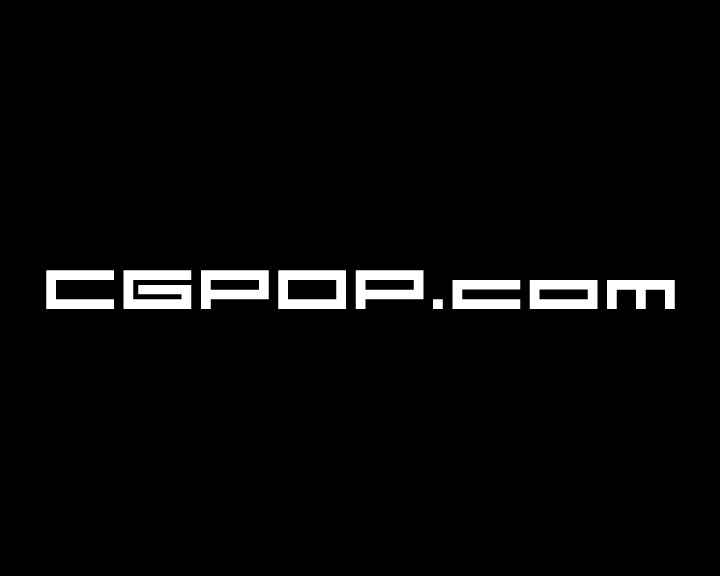
<style>
.page{position:relative;width:720px;height:576px;background:#000000}
.page>*{position:absolute;margin:0}
.t1{font:58px "04b31";color:#ffffff}
</style>
<div class="page">
<p class="t1" style="left:46px;top:270px;width:629px;height:39px">CGPOP.com</p>
</div>
